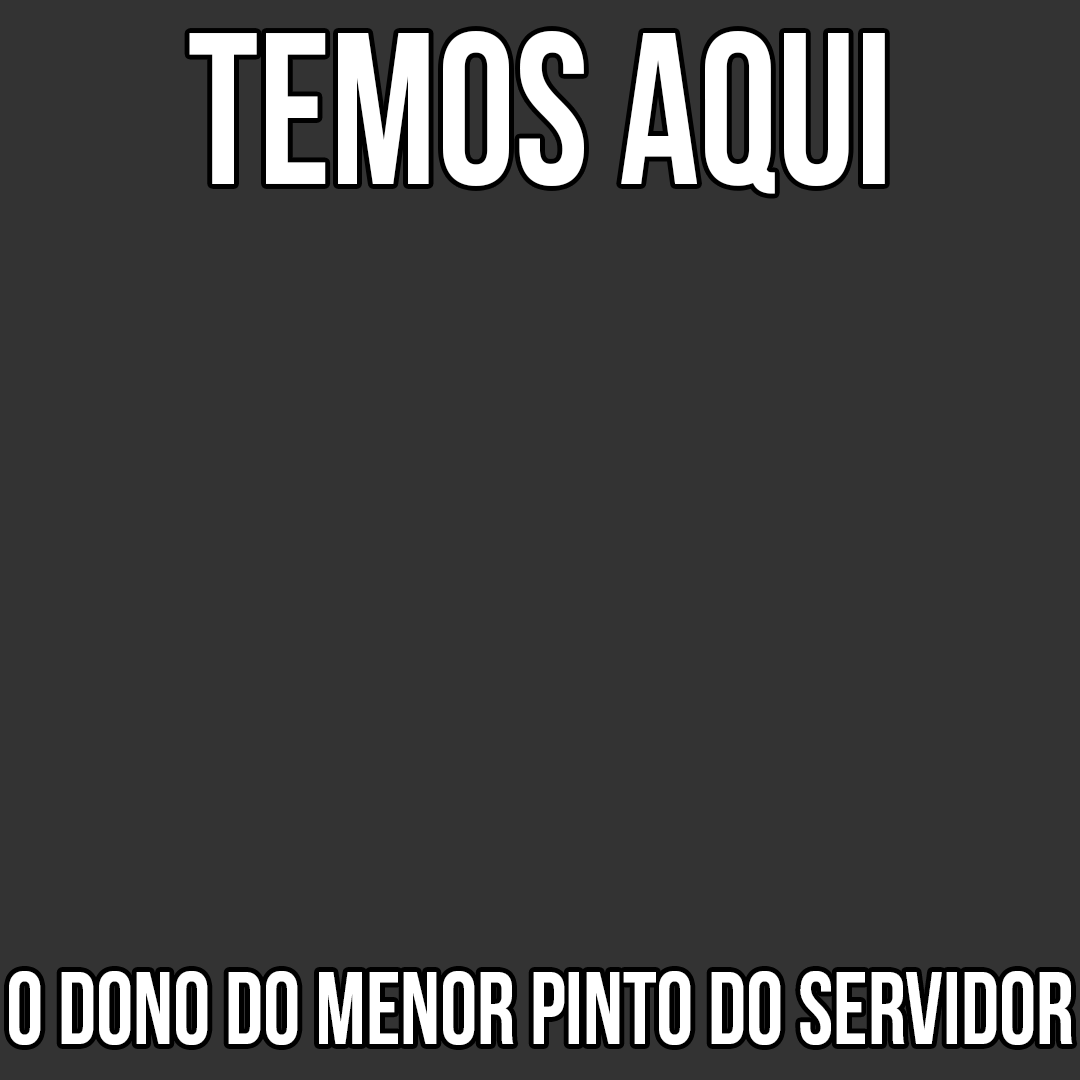
<style>
.page{position:relative;width:1080px;height:1080px;background:#333333}
.page>*{position:absolute;margin:0}
.t1{font:216.2px "BebasNeueBold";color:#ffffff;scale:0.91 1}
.t2{font:103.1px "BebasNeueBold";color:#ffffff;scale:0.91 1}
</style>
<div class="page">
<p class="t1" style="left:189px;top:31px;width:696px;height:163px">temos aqui</p>
<p class="t2" style="left:9px;top:971px;width:1064px;height:74px">o dono do menor pinto do servidor</p>
</div>
